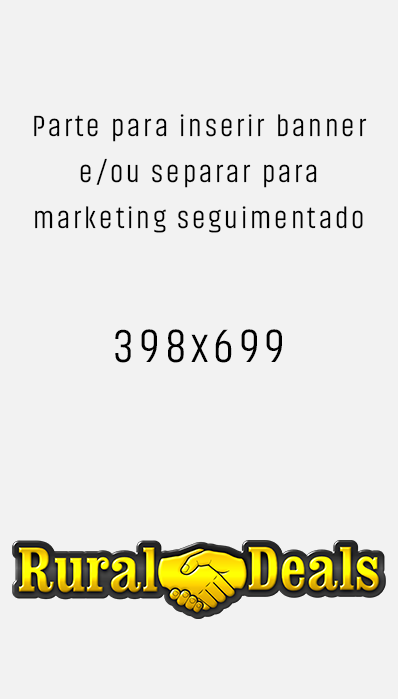
<style>
.page{position:relative;width:398px;height:699px;background:#f2f2f2}
.page>*{position:absolute;margin:0}
.t1{font:30px/46px "Akhand-Semilight";letter-spacing:0.1em;color:#000000}
.t2{font:48px "Akhand-Semilight";letter-spacing:0.1em;color:#000000}
</style>
<div class="page">
<p class="t1" style="left:34px;top:114px;width:333px;height:119px;text-align:center">Parte para inserir banner  e/ou separar para marketing seguimentado</p>
<p class="t2" style="left:115px;top:329px;width:167px;height:34px">398x699</p>
</div>
